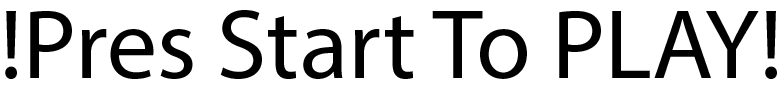
<style>
.page{position:relative;width:783px;height:91px;background:#ffffff}
.page>*{position:absolute;margin:0}
.t1{font:100px "MyriadPro-Regular";color:#000000}
</style>
<div class="page">
<p class="t1" style="left:5px;top:10px;width:772px;height:69px">!Pres Start To PLAY!</p>
</div>
